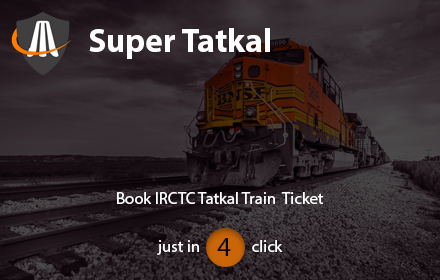
<style>
.page{position:relative;width:440px;height:280px}
.page>*{position:absolute;margin:0}
.t1{font:12px "MyriadPro-Bold";color:#ffffff}
.t2{font:16.7px "MyriadPro-Regular";color:#ffffff}
.t3{font:27.8px "MyriadPro-Regular";color:#000000}
</style>
<div class="page">
<p class="t1" style="left:89px;top:28px;width:181px;height:31px">Super Tatkal</p>
<p class="t2" style="left:117px;top:192px;width:207px;height:12px">Book IRCTC Tatkal Train  Ticket</p>
<p class="t2" style="left:157px;top:240px;width:126px;height:15px">just in            click</p>
<p class="t3" style="left:217px;top:238px;width:14px;height:18px">4</p>
</div>
